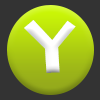
<style>
.page{position:relative;width:100px;height:100px;background:#333333}
.page>*{position:absolute;margin:0}
.t1{font:75px "TF2Build";color:#fefefe}
</style>
<div class="page">
<p class="t1" style="left:24px;top:20px;width:52px;height:53px">y</p>
</div>
